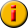
<style>
.page{position:relative;width:28px;height:28px;background:#f6b800}
.page>*{position:absolute;margin:0}
.t1{font:19.7px "Verdana-Bold";font-weight:bold;scale:1.15 1}
</style>
<div class="page">
<p class="t1" style="left:11px;top:5px;width:5px;height:17px">i</p>
</div>
